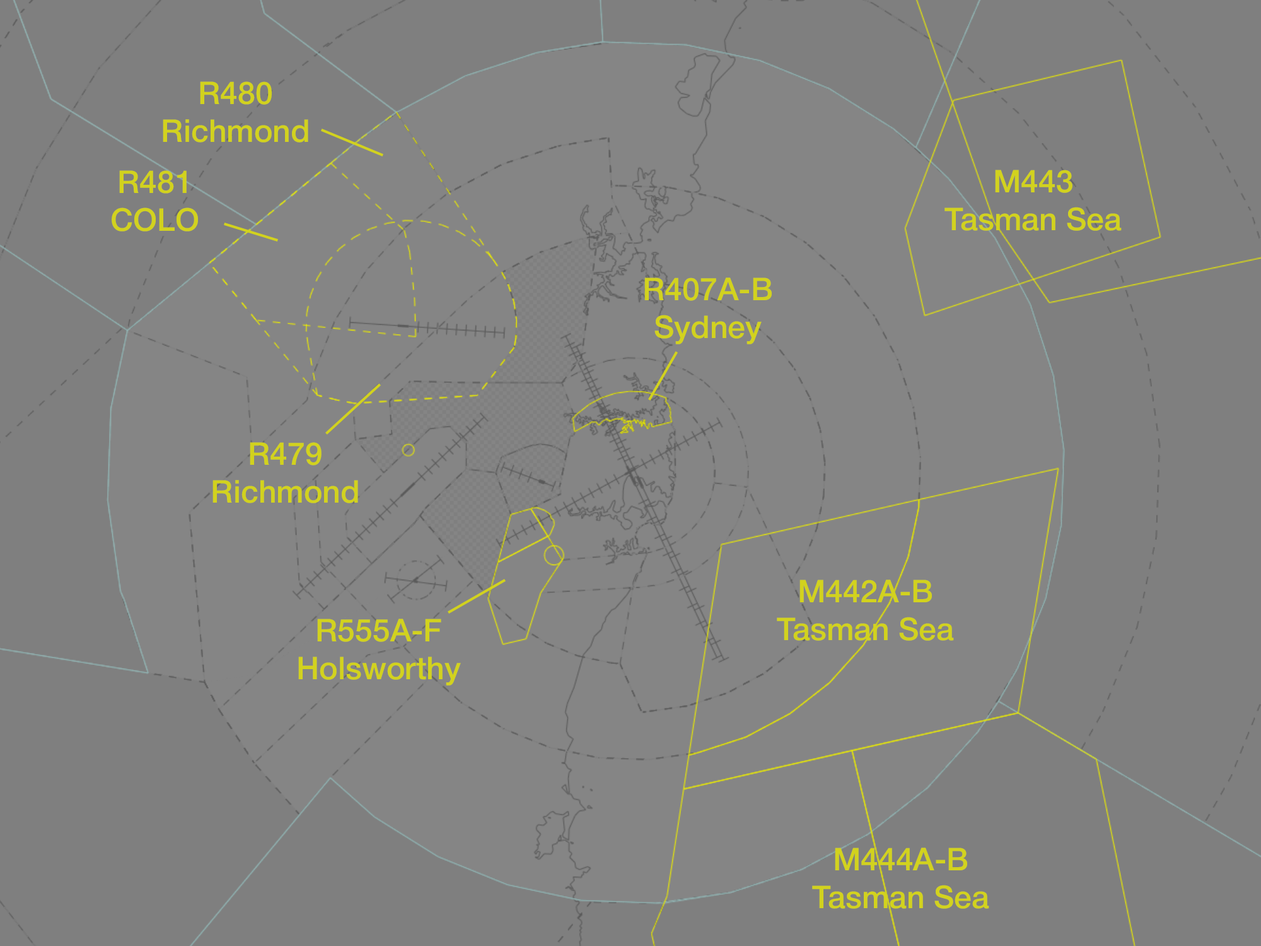
<style>
.page{position:relative;width:1261px;height:946px;background:#858585}
.page>*{position:absolute;margin:0}
.t1{font:31.5px "HelveticaNeue-Medium";color:#d2d21e}
</style>
<div class="page">
<p class="t1" style="left:163px;top:81px;width:145px;height:61px;text-align:center">R480<br>Richmond</p>
<p class="t1" style="left:112px;top:170px;width:86px;height:61px;text-align:center">R481<br>COLO</p>
<p class="t1" style="left:944px;top:170px;width:178px;height:61px;text-align:center">M443<br>Tasman Sea</p>
<p class="t1" style="left:644px;top:277px;width:128px;height:67px;text-align:center">R407A-B<br>Sydney</p>
<p class="t1" style="left:212px;top:442px;width:146px;height:61px;text-align:center">R479<br>Richmond</p>
<p class="t1" style="left:777px;top:579px;width:177px;height:62px;text-align:center">M442A-B<br>Tasman Sea</p>
<p class="t1" style="left:298px;top:618px;width:163px;height:67px;text-align:center">R555A-F<br>Holsworthy</p>
<p class="t1" style="left:812px;top:847px;width:177px;height:61px;text-align:center">M444A-B<br>Tasman Sea</p>
</div>
